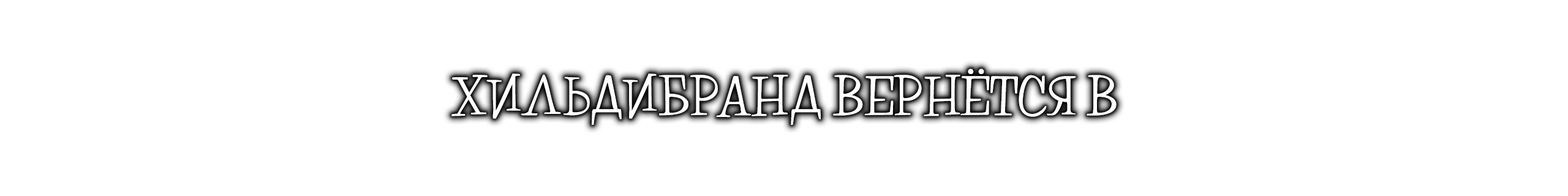
<style>
.page{position:relative;width:1568px;height:196px;background:#ffffff}
.page>*{position:absolute;margin:0}
.t1{font:50.3px "OPTIOrlando";letter-spacing:-0.017em;color:#ffffff}
.t2{font:50.3px "OPTIOrlando";letter-spacing:0.01em;color:#ffffff}
.t3{font:49px "OPTIOrlando";letter-spacing:-0.08em;color:#ffffff}
.t4{font:50.3px "OPTIOrlando";letter-spacing:-0.09em;color:#ffffff}
</style>
<div class="page">
<p class="t1" style="left:451px;top:69px;width:666px;height:56px">ХИ<span class="t2">Л</span><span class="t3">Ь</span>ДИБ<span class="t4">Р</span>АНД ВЕРНËТСЯ В</p>
</div>
